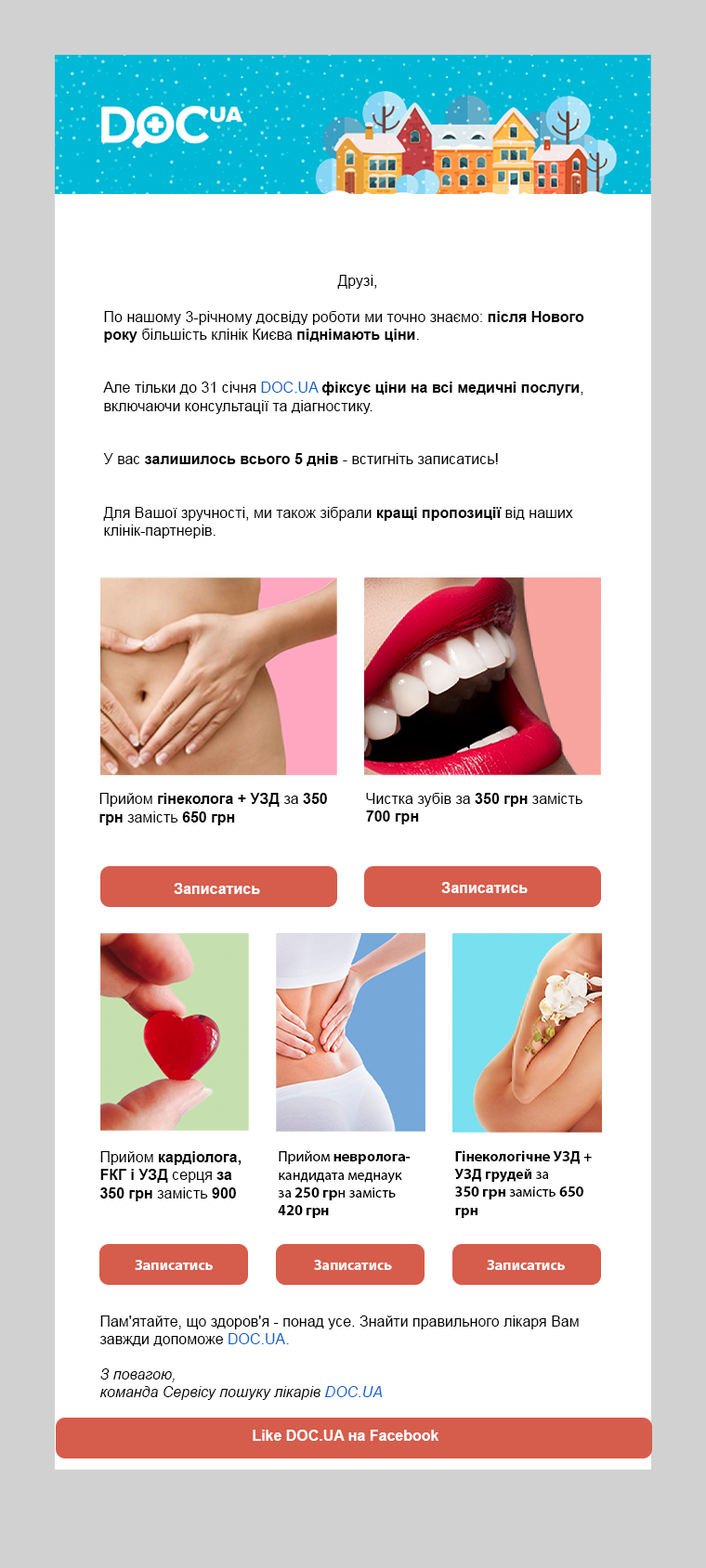
<style>
.page{position:relative;width:706px;height:1568px;background:#ffffff}
.page>*{position:absolute;margin:0}
.t1{font:14.9px "ArialMT";color:#000000}
.t2{font:14.9px "Arial-BoldMT";color:#000000}
.t3{font:14.9px "ArialMT";color:#0e61ca}
.t4{font:14.9px "Arial-BoldMT";color:#ffffff}
.t5{font:14.9px "MyriadPro-Regular";color:#000000}
.t6{font:14.9px "MyriadPro-Bold";color:#000000}
.t7{font:14.9px "MyriadPro-Bold";color:#ffffff}
.t8{font:14.9px "ArialMT";color:#0e61c9}
.t9{font:14.9px "Arial-ItalicMT";color:#000000}
.t10{font:14.9px "Arial-ItalicMT";color:#0e61c9}
</style>
<div class="page">
<p class="t1" style="left:103px;top:275px;width:481px;height:263px">Друзі,<br><br>По нашому 3-річному досвіду роботи ми точно знаємо: <span class="t2">після Нового <br>року</span> більшість клінік Києва <span class="t2">піднімають ціни</span>.<br><br><br>Але тільки до 31 січня <span class="t3">DOC.UA </span><span class="t2">фіксує ціни на всі медичні послуги</span>, <br>включаючи консультації та діагностику.<br><br><br>У вас <span class="t2">залишилось всього 5 днів </span>- встигніть записатись!<br><br><br>Для Вашої зручності, ми також зібрали <span class="t2">кращі пропозиції</span> від наших <br>клінік-партнерів.</p>
<p class="t2" style="left:99px;top:793px;width:228px;height:32px"><span class="t1">Прийом </span>гінеколога + УЗД<span class="t1"> за </span>350<br>грн <span class="t1">замість </span>650 грн</p>
<p class="t1" style="left:366px;top:793px;width:216px;height:31px">Чистка зубів за <span class="t2">350 грн</span> замість <br><span class="t2">700 грн</span></p>
<p class="t4" style="left:441px;top:882px;width:86px;height:11px">Записатись</p>
<p class="t4" style="left:174px;top:883px;width:86px;height:11px">Записатись</p>
<p class="t2" style="left:100px;top:1151px;width:141px;height:50px"><span class="t1">Прийом </span>кардіолога,<br>FКГ і УЗД <span class="t1">серця </span>за<br>350 грн<span class="t1"> замість </span>900</p>
<p class="t5" style="left:278px;top:1150px;width:132px;height:68px">Прийом<span class="t6"> невролога-<br></span>кандидата меднаук<br>за <span class="t6">250 гр</span>н замість<br><span class="t6">420 грн</span></p>
<p class="t6" style="left:454px;top:1150px;width:137px;height:68px">Гінекологічне УЗД +<br>УЗД грудей<span class="t5"> за<br></span>350 грн<span class="t5"> замість </span>650<br>грн</p>
<p class="t7" style="left:135px;top:1260px;width:78px;height:10px">Записатись</p>
<p class="t7" style="left:314px;top:1260px;width:78px;height:10px">Записатись</p>
<p class="t7" style="left:486px;top:1260px;width:78px;height:10px">Записатись</p>
<p class="t1" style="left:99px;top:1315px;width:479px;height:85px">Пам'ятайте, що здоров'я - понад усе. Знайти правильного лікаря Вам <br>завжди допоможе <span class="t8">DOC.UA.<br><br></span><span class="t9">З повагою,<br>команда Сервісу пошуку лікарів </span><span class="t10">DOC.UA</span></p>
<p class="t4" style="left:253px;top:1430px;width:185px;height:11px">Like DOC.UA на Facebook</p>
</div>
